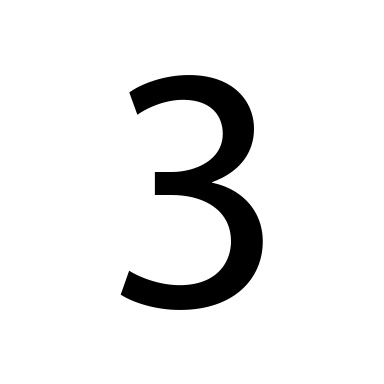
<style>
.page{position:relative;width:384px;height:384px;background:#ffffff}
.page>*{position:absolute;margin:0}
.t1{font:350px "MyriadPro-Regular";color:#000000}
</style>
<div class="page">
<p class="t1" style="left:120px;top:75px;width:143px;height:235px">3</p>
</div>
